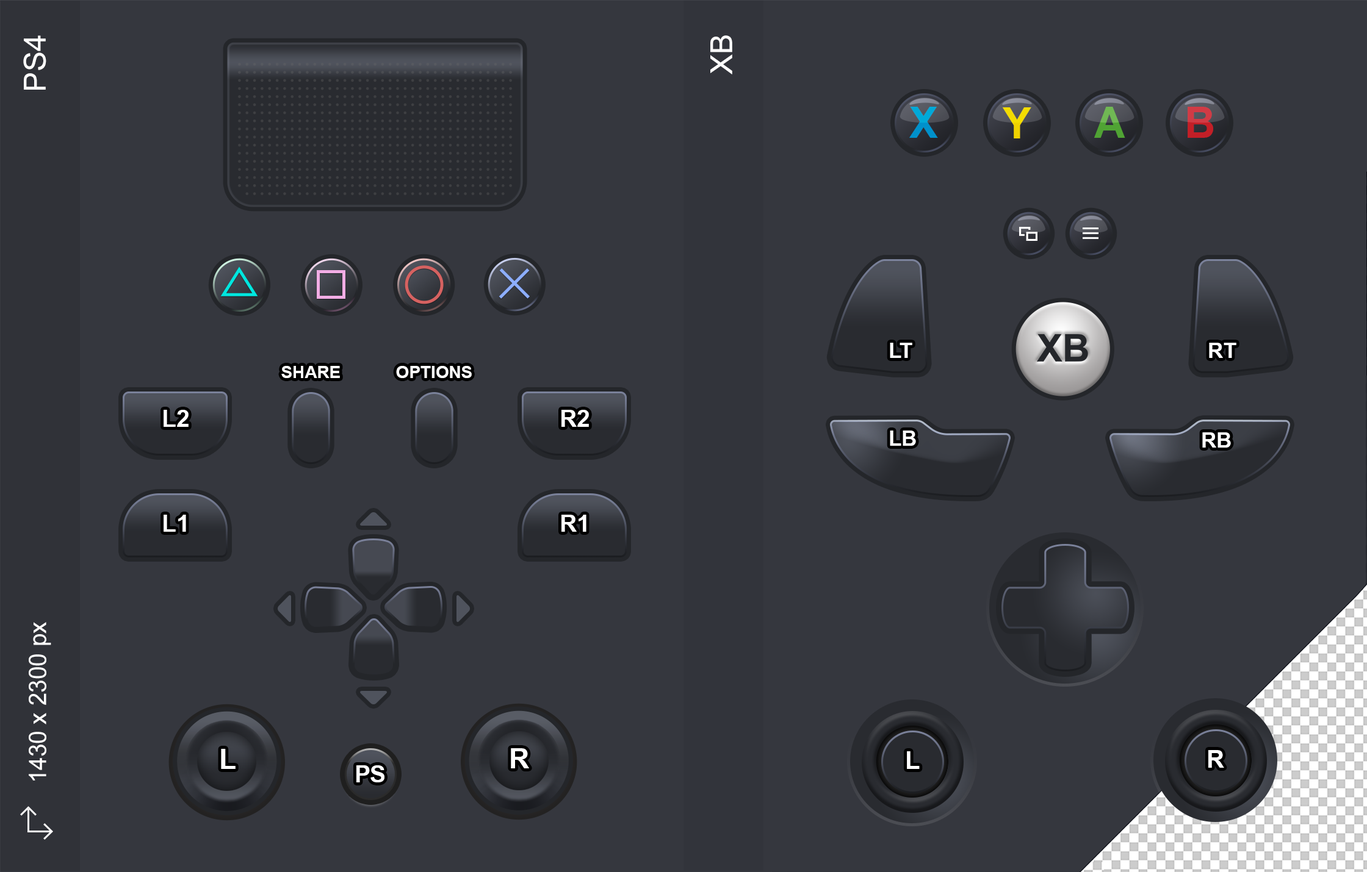
<style>
.page{position:relative;width:1367px;height:872px;background:#35373e}
.page>*{position:absolute;margin:0}
.t1{font:30.5px "ArialMT";color:#ffffff}
.t2{font:43.6px "Arial-BoldMT";color:#0091cb}
.t3{font:43.6px "Arial-BoldMT";color:#f0d200}
.t4{font:43.6px "Arial-BoldMT"}
.t5{font:21.4px "Arial-BoldMT";color:#ffffff}
.t6{font:17.1px "Arial-BoldMT";color:#ffffff}
.t7{font:23.6px "Arial-BoldMT";color:#ffffff}
.t8{font:23.9px "ArialMT";color:#ffffff}
.t9{font:28px "Arial-BoldMT";color:#ffffff}
.t10{font:24.1px "Arial-BoldMT";color:#ffffff}
.t11{font:23.9px "Arial-BoldMT";letter-spacing:-0.03em;color:#ffffff}
</style>
<div class="page">
<p class="t1" style="left:23px;top:35px;width:23px;height:55px;rotate:-90deg">PS4</p>
<p class="t1" style="left:710px;top:35px;width:22px;height:39px;rotate:-90deg">XB</p>
<p class="t2" style="left:909px;top:107px;width:29px;height:31px">X</p>
<p class="t3" style="left:1002px;top:107px;width:29px;height:32px">Y</p>
<p class="t4" style="left:1094px;top:107px;width:31px;height:31px">A</p>
<p class="t4" style="left:1187px;top:107px;width:26px;height:31px">B</p>
<p class="t5" style="left:890px;top:343px;width:22px;height:15px">LT</p>
<p class="t5" style="left:1209px;top:343px;width:27px;height:15px">RT</p>
<p class="t6" style="left:281px;top:366px;width:59px;height:12px">SHARE</p>
<p class="t6" style="left:396px;top:366px;width:76px;height:12px">OPTIONS</p>
<p class="t7" style="left:164px;top:410px;width:25px;height:17px">L2</p>
<p class="t7" style="left:561px;top:410px;width:28px;height:17px">R2</p>
<p class="t5" style="left:890px;top:431px;width:26px;height:15px">LB</p>
<p class="t5" style="left:1202px;top:433px;width:29px;height:15px">RB</p>
<p class="t7" style="left:164px;top:515px;width:22px;height:17px">L1</p>
<p class="t7" style="left:561px;top:515px;width:25px;height:17px">R1</p>
<p class="t8" style="left:29px;top:622px;width:22px;height:159px;rotate:-90deg">1430 x 2300 px</p>
<p class="t9" style="left:221px;top:749px;width:15px;height:20px">L</p>
<p class="t9" style="left:511px;top:749px;width:18px;height:20px">R</p>
<p class="t10" style="left:907px;top:752px;width:12px;height:17px">L</p>
<p class="t10" style="left:1208px;top:750px;width:16px;height:18px">R</p>
<p class="t11" style="left:356px;top:766px;width:28px;height:17px">PS</p>
</div>
